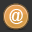
<style>
.page{position:relative;width:32px;height:32px;background:#333333}
.page>*{position:absolute;margin:0}
.t1{font:18.2px "Arial-Black";letter-spacing:-0.04em;color:#ffffff}
</style>
<div class="page">
<p class="t1" style="left:9px;top:9px;width:14px;height:15px">@</p>
</div>
